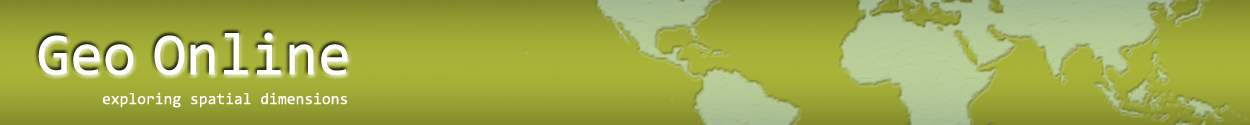
<style>
.page{position:relative;width:1250px;height:125px}
.page>*{position:absolute;margin:0}
.t1{font:60px "Consolas";color:#ffffff}
.t2{font:16px "Consolas";color:#ffffff}
</style>
<div class="page">
<p class="t1" style="left:38px;top:35px;width:96px;height:40px">Geo</p>
<p class="t1" style="left:154px;top:32px;width:194px;height:43px">Online</p>
<p class="t2" style="left:102px;top:92px;width:245px;height:16px">exploring spatial dimensions</p>
</div>
